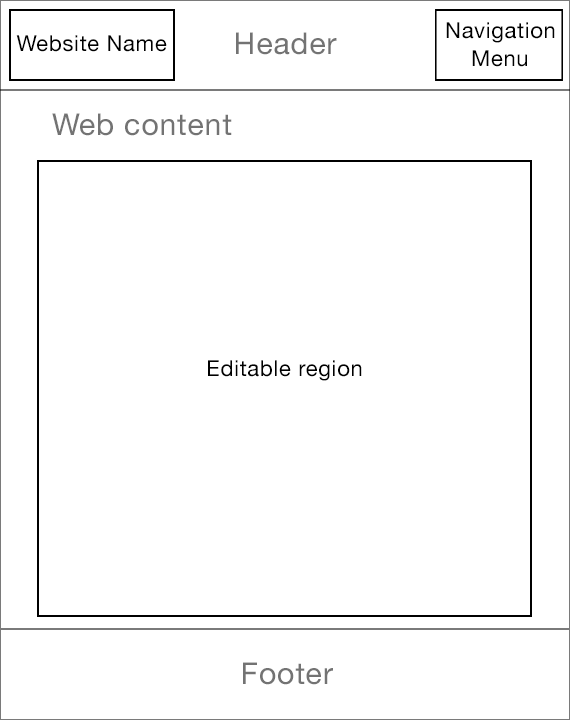
<style>
.page{position:relative;width:570px;height:720px;background:#ffffff}
.page>*{position:absolute;margin:0}
.t1{font:22px "HelveticaNeue";letter-spacing:0.03em;color:#000000}
.t2{font:30.2px "HelveticaNeue";letter-spacing:0.03em;color:#737373}
</style>
<div class="page">
<p class="t1" style="left:446px;top:22px;width:109px;height:21px">Navigation</p>
<p class="t1" style="left:16px;top:35px;width:151px;height:17px">Website Name</p>
<p class="t2" style="left:236px;top:32px;width:101px;height:23px">Header</p>
<p class="t1" style="left:472px;top:50px;width:55px;height:17px">Menu</p>
<p class="t2" style="left:52px;top:113px;width:180px;height:23px">Web content</p>
<p class="t1" style="left:208px;top:360px;width:154px;height:21px">Editable region</p>
<p class="t2" style="left:243px;top:662px;width:90px;height:23px">Footer</p>
</div>
